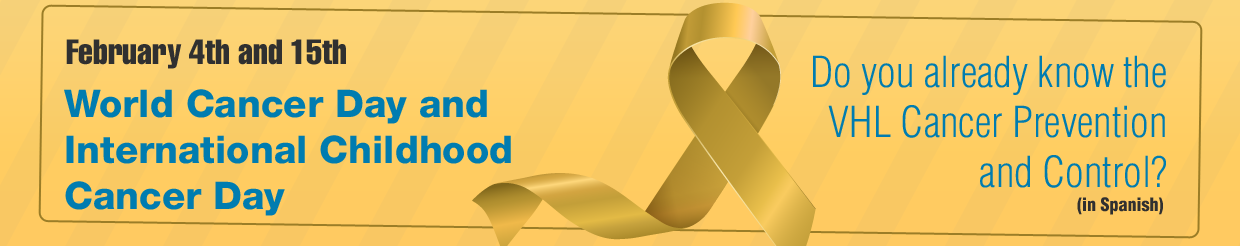
<style>
.page{position:relative;width:1240px;height:246px}
.page>*{position:absolute;margin:0}
.t1{font:34.5px "Helvetica-Compressed";color:#303030}
.t2{font:41.8px "Helvetica-CondensedLight";color:#007cb0}
.t3{font:38px "Helvetica85-Heavy";color:#007cb0}
.t4{font:18px "Helvetica-CondensedBlack";color:#303030}
</style>
<div class="page">
<p class="t1" style="left:66px;top:39px;width:280px;height:30px">February 4th and 15th</p>
<p class="t2" style="left:813px;top:55px;width:353px;height:133px;text-align:right">Do you already know the<br>VHL Cancer Prevention<br>and Control?</p>
<p class="t3" style="left:64px;top:89px;width:447px;height:127px">World Cancer Day and<br>International Childhood<br>Cancer Day</p>
<p class="t4" style="left:1077px;top:197px;width:86px;height:18px">(in Spanish)</p>
</div>
